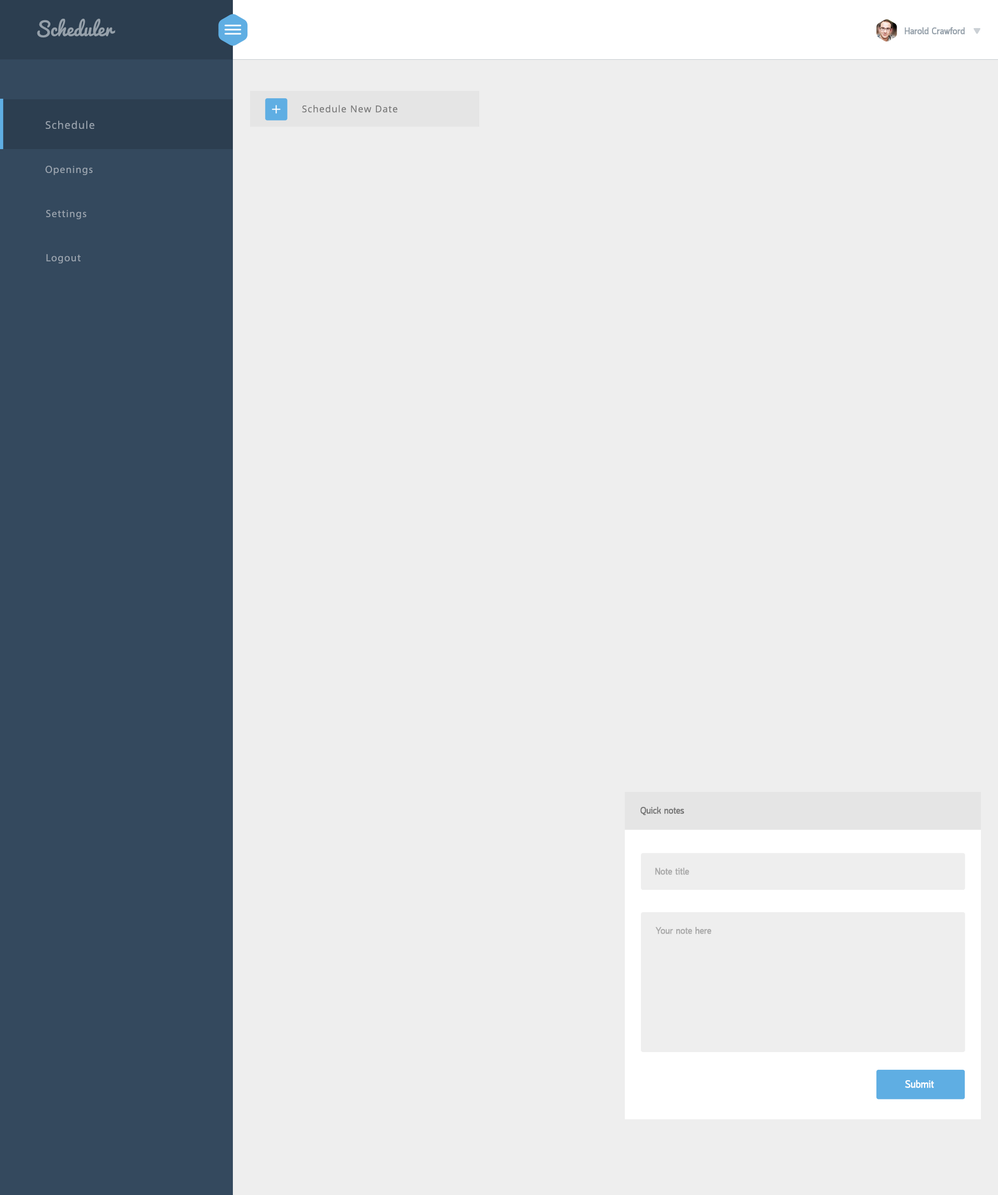
<style>
.page{position:relative;width:998px;height:1195px;background:#eeeeee}
.page>*{position:absolute;margin:0}
.t1{font:18.7px "Pacifico-Regular";color:#95a0aa}
.t2{font:9.4px "Quark-Bold";color:#95a0aa}
.t3{font:9.4px "OpenSans";letter-spacing:0.075em;color:#777777}
.t4{font:10.4px "OpenSans";letter-spacing:0.075em;color:#98a2ad}
.t5{font:10.4px "MyriadPro-Regular";letter-spacing:0.075em;color:#98a2ad}
.t6{font:9.4px "Quark-Bold";color:#777777}
.t7{font:9.4px "Quark-Bold";color:#aaaaaa}
.t8{font:10.4px "Quark-Bold";color:#ffffff}
</style>
<div class="page">
<p class="t1" style="left:37px;top:19px;width:78px;height:19px">Scheduler</p>
<p class="t2" style="left:904px;top:27px;width:60px;height:7px">Harold Crawford</p>
<p class="t3" style="left:302px;top:105px;width:96px;height:8px">Schedule New Date</p>
<p class="t4" style="left:46px;top:121px;width:49px;height:8px">Schedule</p>
<p class="t5" style="left:45px;top:166px;width:47px;height:9px">Openings</p>
<p class="t5" style="left:46px;top:210px;width:40px;height:9px">Settings</p>
<p class="t5" style="left:46px;top:254px;width:35px;height:9px">Logout</p>
<p class="t6" style="left:640px;top:806px;width:44px;height:9px">Quick notes</p>
<p class="t7" style="left:655px;top:868px;width:34px;height:7px">Note title</p>
<p class="t7" style="left:655px;top:927px;width:56px;height:7px">Your note here</p>
<p class="t8" style="left:905px;top:1080px;width:29px;height:8px">Submit</p>
</div>
